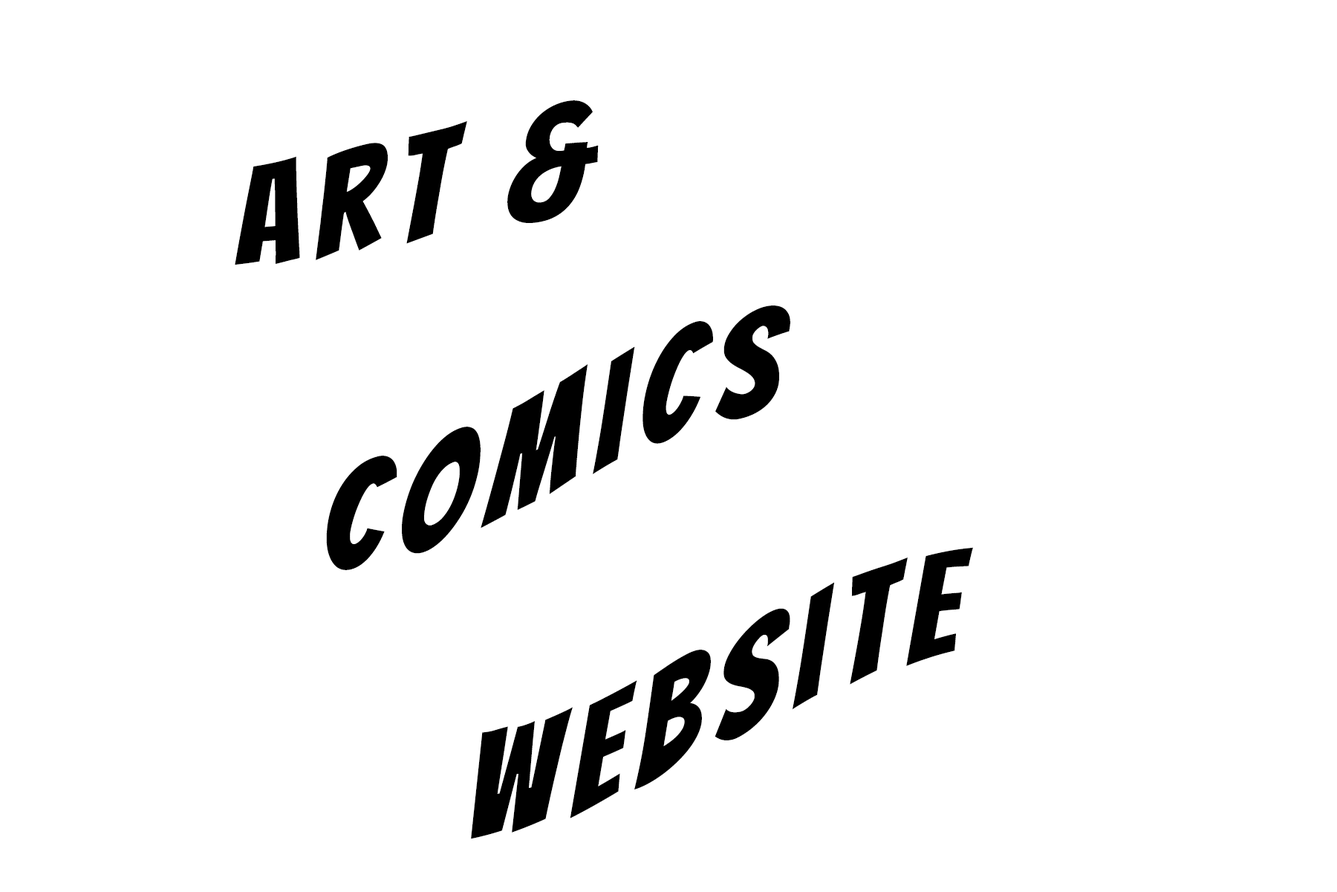
<style>
.page{position:relative;width:1337px;height:892px;background:#ffffff}
.page>*{position:absolute;margin:0}
.t1{font:148.6px "Bangers-Regular";letter-spacing:0.1em;color:#000000}
</style>
<div class="page">
<p class="t1" style="left:235px;top:100px;width:364px;height:165px">art &amp;</p>
<p class="t1" style="left:326px;top:305px;width:465px;height:265px">Comics</p>
<p class="t1" style="left:471px;top:547px;width:502px;height:292px">Website</p>
</div>
